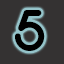
<style>
.page{position:relative;width:64px;height:64px;background:#343232}
.page>*{position:absolute;margin:0}
.t1{font:60px "Neon80s";color:#000000}
</style>
<div class="page">
<p class="t1" style="left:15px;top:10px;width:30px;height:41px">5</p>
</div>
